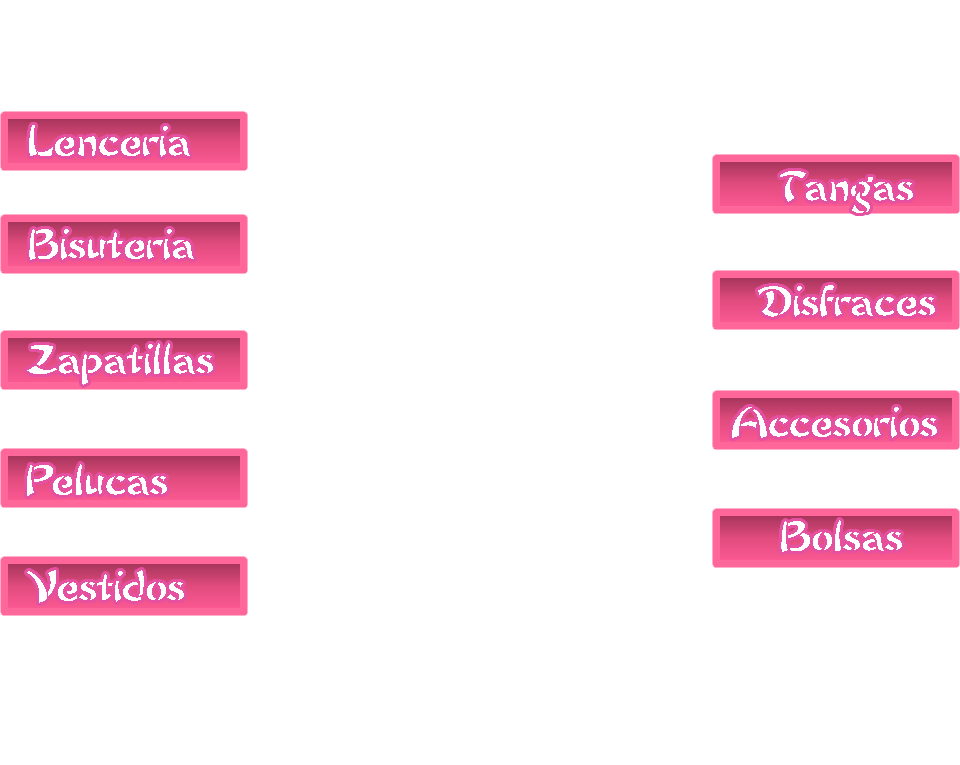
<style>
.page{position:relative;width:960px;height:765px;background:#ffffff}
.page>*{position:absolute;margin:0}
.t1{font:36px "ChowFun";color:#ffffff}
</style>
<div class="page">
<p class="t1" style="left:29px;top:125px;width:161px;height:32px">Lenceria</p>
<p class="t1" style="left:780px;top:171px;width:133px;height:42px">Tangas</p>
<p class="t1" style="left:29px;top:229px;width:165px;height:31px">Bisuteria</p>
<p class="t1" style="left:758px;top:285px;width:177px;height:32px">Disfraces</p>
<p class="t1" style="left:27px;top:343px;width:186px;height:42px">Zapatillas</p>
<p class="t1" style="left:732px;top:407px;width:205px;height:31px">Accesorios</p>
<p class="t1" style="left:27px;top:464px;width:140px;height:32px">Pelucas</p>
<p class="t1" style="left:781px;top:520px;width:121px;height:32px">Bolsas</p>
<p class="t1" style="left:27px;top:570px;width:157px;height:33px">Vestidos</p>
</div>
